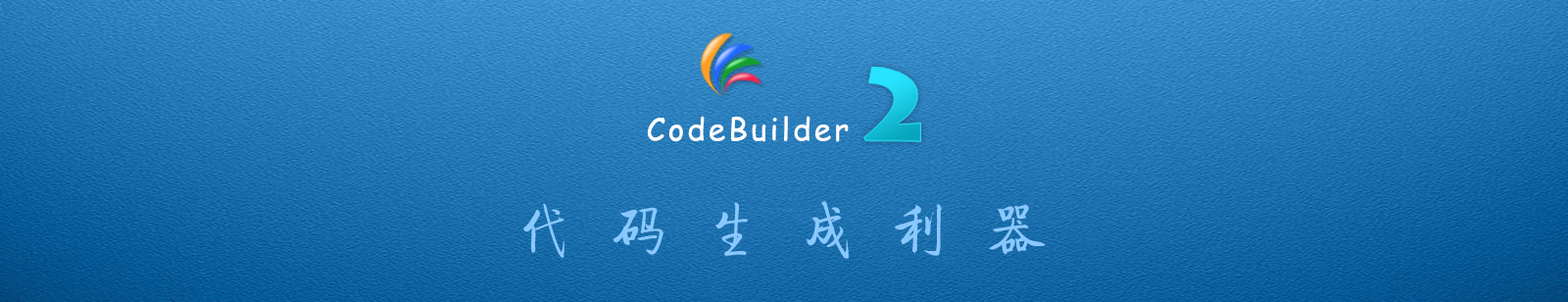
<style>
.page{position:relative;width:1568px;height:302px}
.page>*{position:absolute;margin:0}
.t1{font:30.8px "ComicSansMS";letter-spacing:0.1em;color:#ffffff}
.t2{font:58.8px "JQiTi";letter-spacing:0.6em;color:#88c8ff}
</style>
<div class="page">
<p class="t1" style="left:648px;top:116px;width:201px;height:26px">CodeBuilder</p>
<p class="t2" style="left:523px;top:201px;width:522px;height:58px">代码生成利器</p>
</div>
